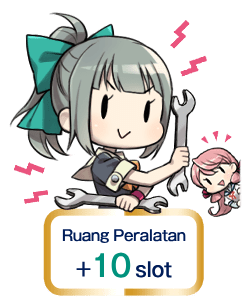
<style>
.page{position:relative;width:247px;height:307px;background:#ffffff}
.page>*{position:absolute;margin:0}
.t1{font:15px "GothicMB101Pro-Medium";letter-spacing:-0.04em;color:#001d59;font-weight:bold;scale:0.9 1}
.t2{font:20px "GothicMB101Pro-Medium";letter-spacing:-0.04em;color:#001d59;font-weight:bold;scale:0.9 1}
.t3{font:30px "GothicMB101Pro-Medium";letter-spacing:-0.04em;color:#00927d;font-weight:bold;scale:0.9 1}
</style>
<div class="page">
<p class="t1" style="left:62px;top:229px;width:124px;height:49px;text-align:center">Ruang Peralatan<br><span class="t2">+</span><span class="t3">10 </span><span class="t2">slot</span></p>
</div>
